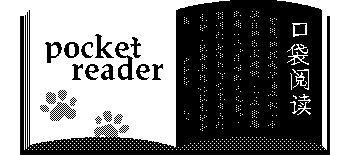
<style>
.page{position:relative;width:350px;height:155px;background:#ffffff}
.page>*{position:absolute;margin:0}
.t1{font:36px "XiQuezhaopaiti-Regular";color:#000000}
</style>
<div class="page">
<p class="t1" style="left:45px;top:34px;width:96px;height:29px">pocket</p>
<p class="t1" style="left:72px;top:56px;width:91px;height:24px">reader</p>
</div>
